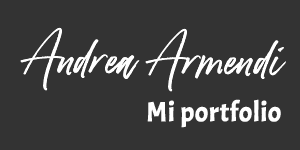
<style>
.page{position:relative;width:300px;height:150px;background:#333333}
.page>*{position:absolute;margin:0}
.t1{font:23px "Betterworks";color:#ffffff;font-weight:bold}
.t2{font:27.5px "Acme-Regular";color:#ffffff;font-weight:bold}
</style>
<div class="page">
<p class="t1" style="left:20px;top:27px;width:266px;height:65px">Andrea Armendi</p>
<p class="t2" style="left:147px;top:99px;width:134px;height:29px">Mi portfolio</p>
</div>
